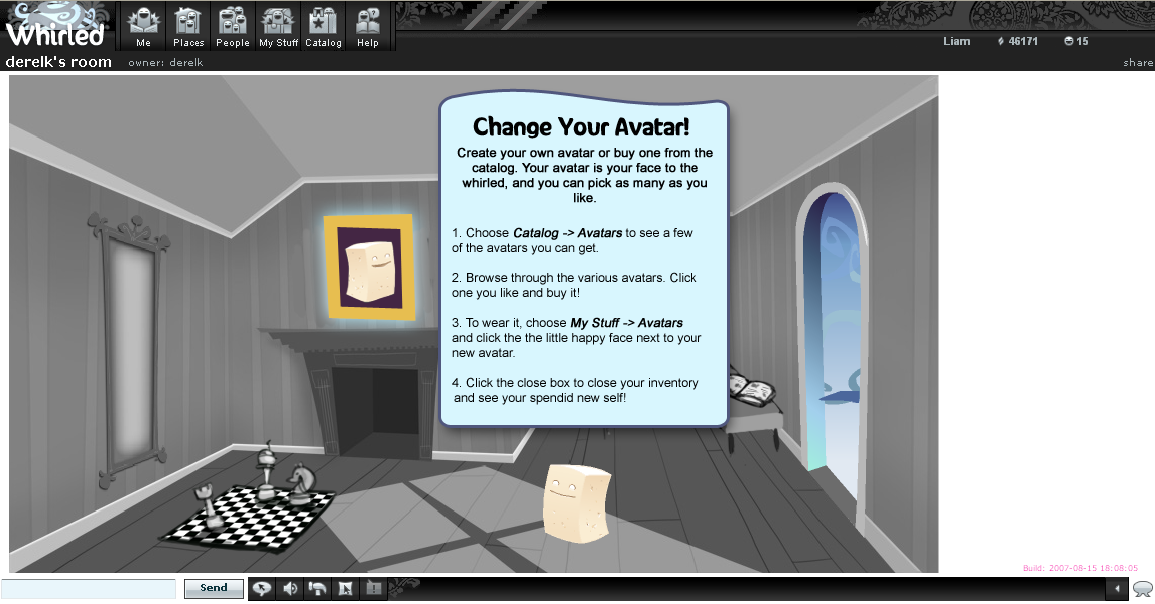
<style>
.page{position:relative;width:1155px;height:604px}
.page>*{position:absolute;margin:0}
.t1{font:20.8px "SunnySide";color:#000000;font-weight:bold}
.t2{font:12.5px "ArialMT";color:#000000;font-weight:bold}
.t3{font:12.5px "ArialMT";color:#000000}
.t4{font:12.5px "ArialMT";color:#000000;font-weight:bold;font-style:italic}
</style>
<div class="page">
<p class="t1" style="left:473px;top:115px;width:216px;height:24px">Change Your Avatar!</p>
<p class="t2" style="left:457px;top:147px;width:256px;height:56px;text-align:center">Create your own avatar or buy one from the catalog. Your avatar is your face to the whirled, and you can pick as many as you like.</p>
<p class="t3" style="left:452px;top:227px;width:250px;height:178px;text-align:center"><span class="t2"><br></span><br>1. Choose <span class="t4">Catalog -&gt; Avatars</span> to see a few of the avatars you can get.<br><br>2. Browse through the various avatars. Click one you like and buy it!<br><br>3. To wear it, choose <span class="t4">My Stuff -&gt; Avatars</span> and click the the little happy face next to your new avatar.<br><br>4. Click the close box to close your inventory and see your spendid new self!</p>
</div>
